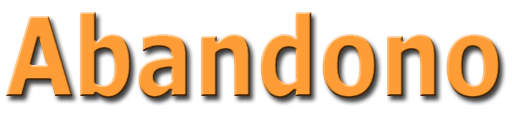
<style>
.page{position:relative;width:512px;height:128px;background:#ffffff}
.page>*{position:absolute;margin:0}
.t1{font:109.7px "Verdana-Bold";color:#fe9d35;scale:0.81 1}
</style>
<div class="page">
<p class="t1" style="left:6px;top:12px;width:494px;height:86px">Abandono</p>
</div>
